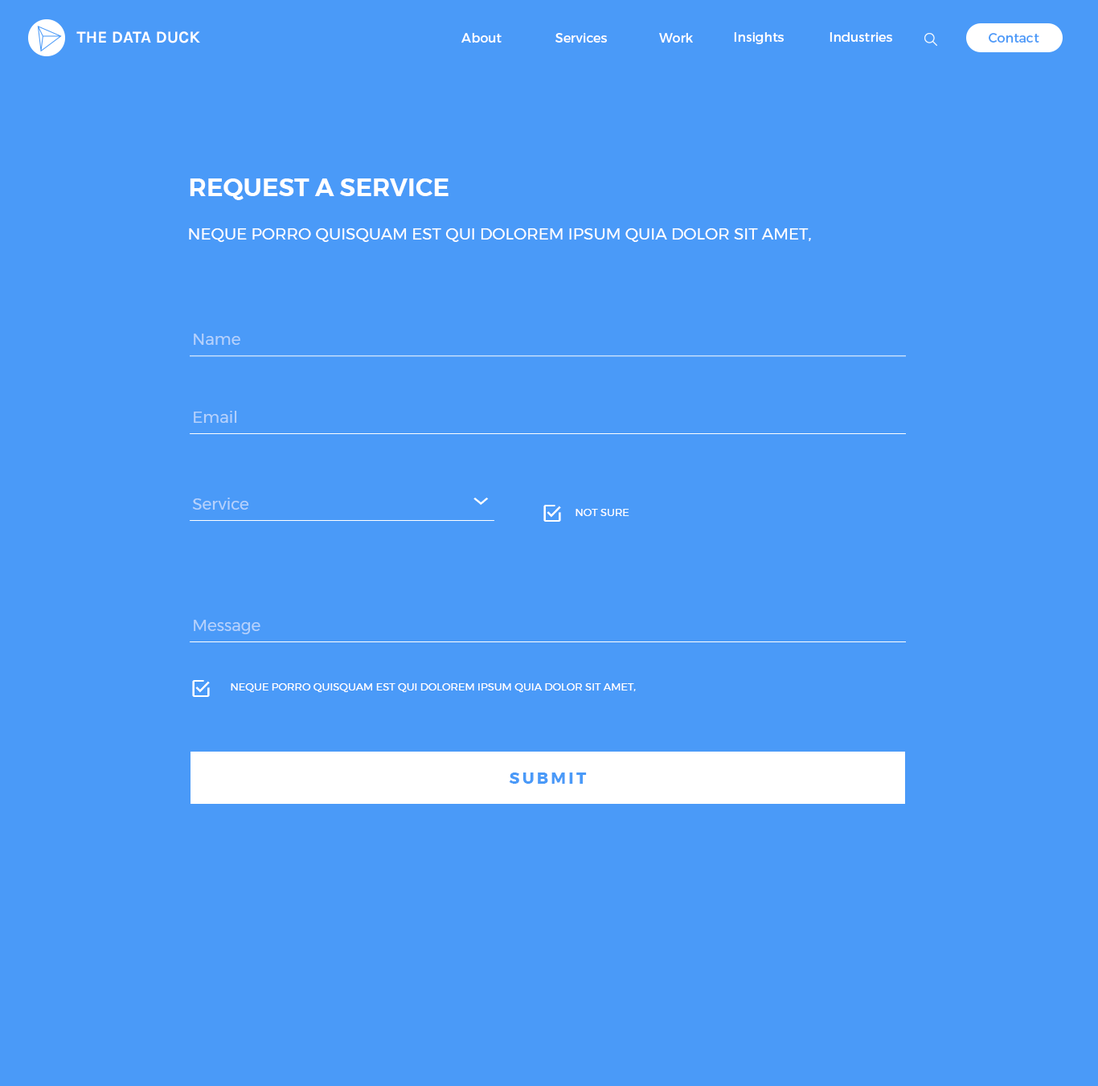
<style>
.page{position:relative;width:1098px;height:1086px;background:#4a9af8}
.page>*{position:absolute;margin:0}
.t1{font:16.7px "Karla-Bold";color:#ffffff;text-transform:uppercase}
.t2{font:12.9px "Montserrat-Regular";color:#ffffff}
.t3{font:12.9px "Montserrat-Regular";color:#4a9af8}
.t4{font:24.8px "Montserrat-SemiBold";color:#ffffff;text-transform:uppercase}
.t5{font:16.1px "Montserrat-Regular";color:#ffffff;text-transform:uppercase}
.t6{font:16px "Montserrat-Regular";color:#b4d1fc}
.t7{font:10.4px "Montserrat-Regular";color:#ffffff;text-transform:uppercase}
.t8{font:16.1px "Montserrat-Bold";letter-spacing:0.16em;color:#4a9af8;text-transform:uppercase}
</style>
<div class="page">
<p class="t1" style="left:76px;top:31px;width:124px;height:12px">The Data Duck</p>
<p class="t2" style="left:461px;top:33px;width:41px;height:10px">About</p>
<p class="t2" style="left:555px;top:33px;width:52px;height:10px">Services</p>
<p class="t2" style="left:659px;top:33px;width:34px;height:10px">Work</p>
<p class="t2" style="left:734px;top:32px;width:50px;height:12px">Insights</p>
<p class="t2" style="left:830px;top:32px;width:62px;height:10px">Industries</p>
<p class="t3" style="left:989px;top:33px;width:50px;height:10px">Contact</p>
<p class="t4" style="left:190px;top:178px;width:259px;height:22px">Request a service</p>
<p class="t5" style="left:189px;top:228px;width:622px;height:14px">Neque porro quisquam est qui dolorem ipsum quia dolor sit amet,</p>
<p class="t6" style="left:194px;top:334px;width:46px;height:11px">Name</p>
<p class="t6" style="left:194px;top:411px;width:43px;height:12px">Email</p>
<p class="t6" style="left:192px;top:498px;width:57px;height:12px">Service</p>
<p class="t7" style="left:576px;top:509px;width:53px;height:7px">Not sure</p>
<p class="t6" style="left:194px;top:620px;width:66px;height:14px">Message</p>
<p class="t7" style="left:231px;top:683px;width:405px;height:9px">Neque porro quisquam est qui dolorem ipsum quia dolor sit amet,</p>
<p class="t8" style="left:509px;top:772px;width:78px;height:12px">Submit</p>
</div>
